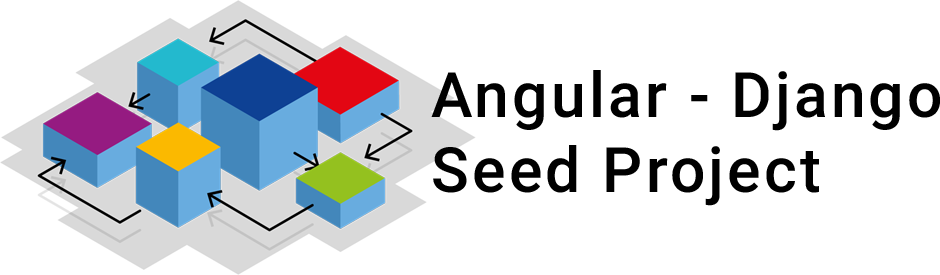
<style>
.page{position:relative;width:940px;height:275px;background:#ffffff}
.page>*{position:absolute;margin:0}
.t1{font:62.5px "Roboto-Medium";letter-spacing:0.05em;color:#000000}
</style>
<div class="page">
<p class="t1" style="left:431px;top:70px;width:509px;height:136px">Angular - Django<br>Seed Project</p>
</div>
